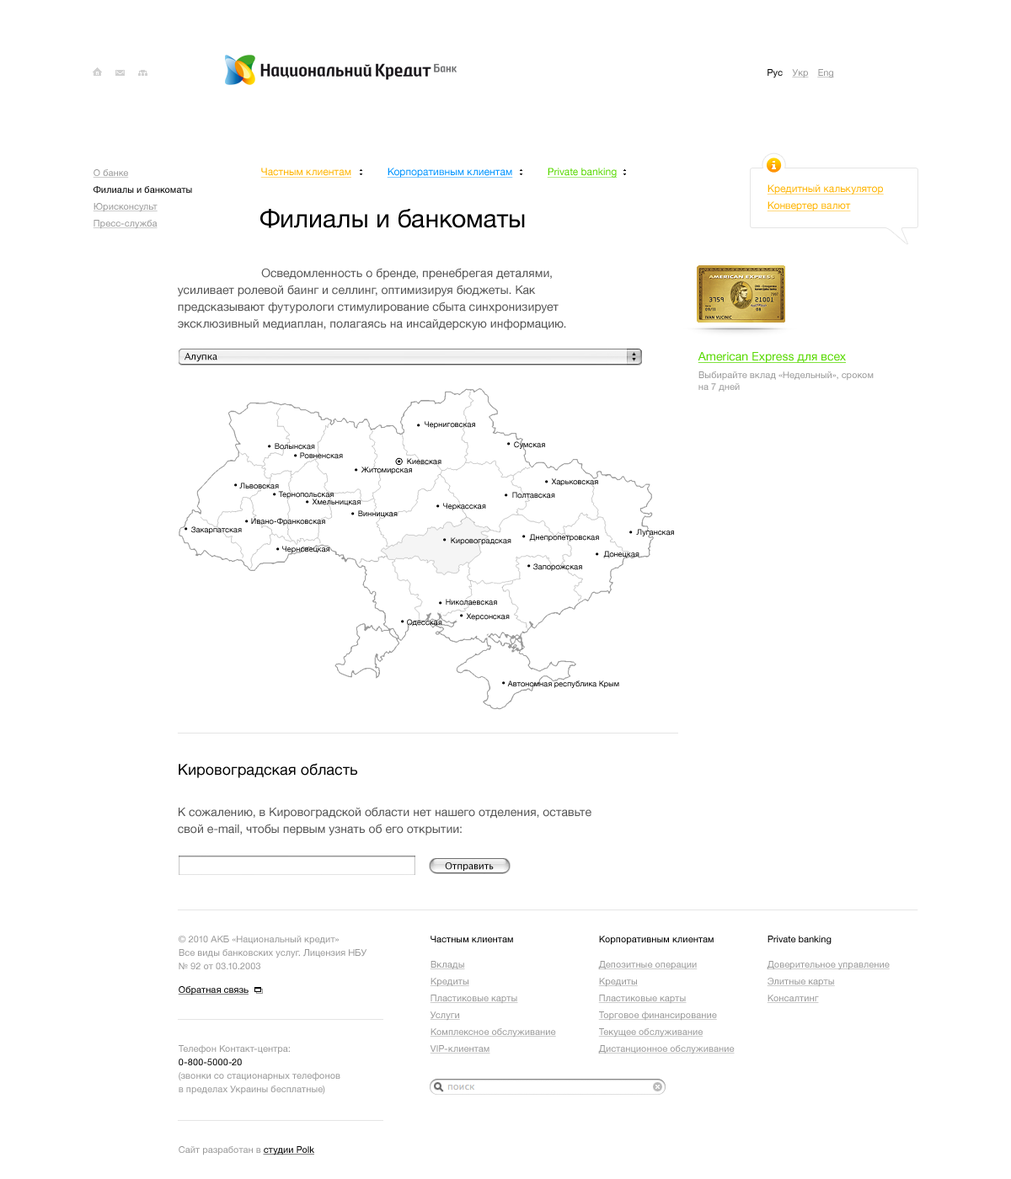
<style>
.page{position:relative;width:1011px;height:1179px;background:#ffffff}
.page>*{position:absolute;margin:0}
.t1{font:9.3px "HelveticaNeue";color:#000000}
.t2{font:9.3px "HelveticaNeue";color:#999999;text-decoration:underline}
.t3{font:10.1px "HelveticaNeue";color:#ffb400;text-decoration:underline}
.t4{font:10.1px "HelveticaNeue";color:#0094ff;text-decoration:underline}
.t5{font:10.1px "HelveticaNeue";color:#57d900;text-decoration:underline}
.t6{font:25.3px "HelveticaNeue";color:#000000}
.t7{font:11.8px/16.8px "HelveticaNeue";color:#555555}
.t8{font:9.3px "LucidaGrande";color:#000000}
.t9{font:11.8px "HelveticaNeue";color:#57d900;text-decoration:underline}
.t10{font:9.3px "HelveticaNeue";color:#999999}
.t11{font:7.6px "HelveticaNeue";color:#000000}
.t12{font:7.6px "HelveticaNeue"}
.t13{font:15.2px "HelveticaNeue";color:#000000}
.t14{font:9.3px/13.5px "HelveticaNeue";color:#999999}
.t15{font:9.3px "HelveticaNeue";color:#000000;text-decoration:underline}
.t16{font:9.3px/13.5px "HelveticaNeue";color:#010101}
</style>
<div class="page">
<p class="t1" style="left:768px;top:69px;width:15px;height:9px">Рус</p>
<p class="t2" style="left:792px;top:69px;width:17px;height:9px">Укр</p>
<p class="t2" style="left:817px;top:69px;width:17px;height:9px">Eng</p>
<p class="t2" style="left:93px;top:169px;width:36px;height:9px">О банке</p>
<p class="t3" style="left:260px;top:168px;width:91px;height:10px">Частным клиентам</p>
<p class="t4" style="left:387px;top:168px;width:126px;height:10px">Корпоративным клиентам</p>
<p class="t5" style="left:547px;top:168px;width:71px;height:10px">Private banking</p>
<p class="t3" style="left:767px;top:185px;width:117px;height:10px">Кредитный калькулятор</p>
<p class="t1" style="left:94px;top:186px;width:98px;height:8px">Филиалы и банкоматы</p>
<p class="t2" style="left:93px;top:203px;width:65px;height:9px">Юрисконсульт</p>
<p class="t6" style="left:260px;top:209px;width:265px;height:19px">Филиалы и банкоматы</p>
<p class="t3" style="left:767px;top:201px;width:84px;height:10px">Конвертер валют</p>
<p class="t2" style="left:93px;top:220px;width:65px;height:9px">Пресс-служба</p>
<p class="t7" style="left:177px;top:268px;width:389px;height:62px">Осведомленность о бренде, пренебрегая деталями, <br>усиливает ролевой баинг и селлинг, оптимизируя бюджеты. Как предсказывают футурологи стимулирование сбыта синхронизирует эксклюзивный медиаплан, полагаясь на инсайдерскую информацию.</p>
<p class="t8" style="left:185px;top:353px;width:32px;height:9px">Алупка</p>
<p class="t9" style="left:698px;top:352px;width:148px;height:11px">American Express для всех</p>
<p class="t10" style="left:698px;top:372px;width:176px;height:20px">Выбирайте вклад «Недельный», сроком<br>на 7 дней</p>
<p class="t11" style="left:425px;top:421px;width:50px;height:8px">Черниговская</p>
<p class="t12" style="left:275px;top:443px;width:40px;height:7px">Волынская</p>
<p class="t12" style="left:514px;top:441px;width:31px;height:8px">Сумская</p>
<p class="t12" style="left:300px;top:452px;width:43px;height:7px">Ровненская</p>
<p class="t12" style="left:407px;top:458px;width:34px;height:7px">Киевская</p>
<p class="t12" style="left:361px;top:467px;width:51px;height:7px">Житомирская</p>
<p class="t12" style="left:239px;top:483px;width:40px;height:6px">Львовская</p>
<p class="t11" style="left:551px;top:479px;width:47px;height:7px">Харьковская</p>
<p class="t12" style="left:278px;top:491px;width:56px;height:8px">Тернопольская</p>
<p class="t12" style="left:512px;top:492px;width:43px;height:7px">Полтавская</p>
<p class="t11" style="left:312px;top:499px;width:49px;height:7px">Хмельницкая</p>
<p class="t12" style="left:443px;top:503px;width:43px;height:8px">Черкасская</p>
<p class="t11" style="left:251px;top:518px;width:74px;height:8px">Ивано-Франковская</p>
<p class="t11" style="left:358px;top:511px;width:40px;height:7px">Винницкая</p>
<p class="t11" style="left:191px;top:527px;width:51px;height:7px">Закарпатская</p>
<p class="t11" style="left:636px;top:529px;width:38px;height:8px">Луганская</p>
<p class="t12" style="left:282px;top:546px;width:47px;height:8px">Черновецкая</p>
<p class="t12" style="left:451px;top:538px;width:60px;height:7px">Кировоградская</p>
<p class="t12" style="left:529px;top:534px;width:70px;height:8px">Днепропетровская</p>
<p class="t12" style="left:603px;top:551px;width:36px;height:8px">Донецкая</p>
<p class="t12" style="left:533px;top:564px;width:49px;height:7px">Запорожская</p>
<p class="t11" style="left:446px;top:599px;width:51px;height:7px">Николаевская</p>
<p class="t11" style="left:466px;top:613px;width:44px;height:8px">Херсонская</p>
<p class="t11" style="left:407px;top:619px;width:35px;height:8px">Одесская</p>
<p class="t11" style="left:507px;top:681px;width:112px;height:7px">Автономная республика Крым</p>
<p class="t13" style="left:179px;top:763px;width:178px;height:15px">Кировоградская область</p>
<p class="t7" style="left:178px;top:807px;width:413px;height:29px">К сожалению, в Кировоградской области нет нашего отделения, оставьте<br>свой e-mail, чтобы первым узнать об его открытии:</p>
<p class="t8" style="left:445px;top:863px;width:49px;height:9px">Отправить</p>
<p class="t14" style="left:179px;top:936px;width:188px;height:34px">© 2010 АКБ «Национальный кредит»<br>Все виды банковских услуг. Лицензия НБУ<br>№ 92 от 03.10.2003</p>
<p class="t1" style="left:431px;top:936px;width:82px;height:7px">Частным клиентам</p>
<p class="t1" style="left:599px;top:936px;width:115px;height:9px">Корпоративным клиентам</p>
<p class="t1" style="left:768px;top:936px;width:64px;height:9px">Private banking</p>
<p class="t2" style="left:430px;top:961px;width:35px;height:9px">Вклады</p>
<p class="t2" style="left:598px;top:961px;width:100px;height:10px">Депозитные операции</p>
<p class="t2" style="left:767px;top:961px;width:123px;height:10px">Доверительное управление</p>
<p class="t15" style="left:178px;top:987px;width:71px;height:9px">Обратная связь</p>
<p class="t2" style="left:430px;top:978px;width:39px;height:9px">Кредиты</p>
<p class="t2" style="left:598px;top:978px;width:40px;height:9px">Кредиты</p>
<p class="t2" style="left:767px;top:978px;width:68px;height:9px">Элитные карты</p>
<p class="t2" style="left:430px;top:995px;width:88px;height:9px">Пластиковые карты</p>
<p class="t2" style="left:598px;top:995px;width:89px;height:9px">Пластиковые карты</p>
<p class="t2" style="left:767px;top:995px;width:52px;height:8px">Консалтинг</p>
<p class="t2" style="left:430px;top:1012px;width:30px;height:9px">Услуги</p>
<p class="t2" style="left:598px;top:1012px;width:119px;height:9px">Торговое финансирование</p>
<p class="t2" style="left:430px;top:1029px;width:126px;height:9px">Комплексное обслуживание</p>
<p class="t2" style="left:598px;top:1029px;width:105px;height:9px">Текущее обслуживание</p>
<p class="t14" style="left:179px;top:1046px;width:161px;height:49px">Телефон Контакт-центра:<br><span class="t16">0-800-5000-20<br></span>(звонки со стационарных телефонов<br>в пределах Украины бесплатные)</p>
<p class="t2" style="left:430px;top:1046px;width:60px;height:8px">VIP-клиентам</p>
<p class="t2" style="left:598px;top:1046px;width:137px;height:9px">Дистанционное обслуживание</p>
<p class="t10" style="left:179px;top:1147px;width:135px;height:9px">Сайт разработан в <span class="t15">студии Polk</span></p>
</div>
